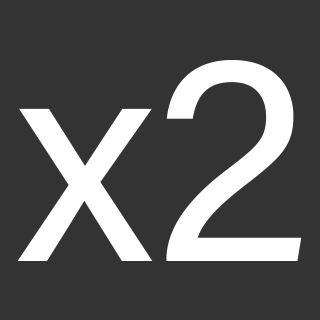
<style>
.page{position:relative;width:320px;height:320px;background:#333333}
.page>*{position:absolute;margin:0}
.t1{font:300px "AcuminConcept-Regular";color:#ffffff}
</style>
<div class="page">
<p class="t1" style="left:17px;top:60px;width:285px;height:201px">x2</p>
</div>
